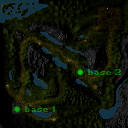
<style>
.page{position:relative;width:128px;height:128px}
.page>*{position:absolute;margin:0}
.t1{font:9px "Photoshop Small";color:#0a7201;font-weight:bold;scale:1.2 1}
.t2{font:9px "Photoshop Small";letter-spacing:-0.1em;color:#0a7201;font-weight:bold;scale:1.2 1}
.t3{font:9px "Photoshop Small";color:#0b7000;font-weight:bold;scale:1.2 1}
.t4{font:9px "Photoshop Small";letter-spacing:-0.1em;color:#0b7000;font-weight:bold;scale:1.2 1}
</style>
<div class="page">
<p class="t1" style="left:88px;top:69px;width:33px;height:6px">bas<span class="t2">e 2</span></p>
<p class="t3" style="left:25px;top:106px;width:30px;height:6px">bas<span class="t4">e 1</span></p>
</div>
